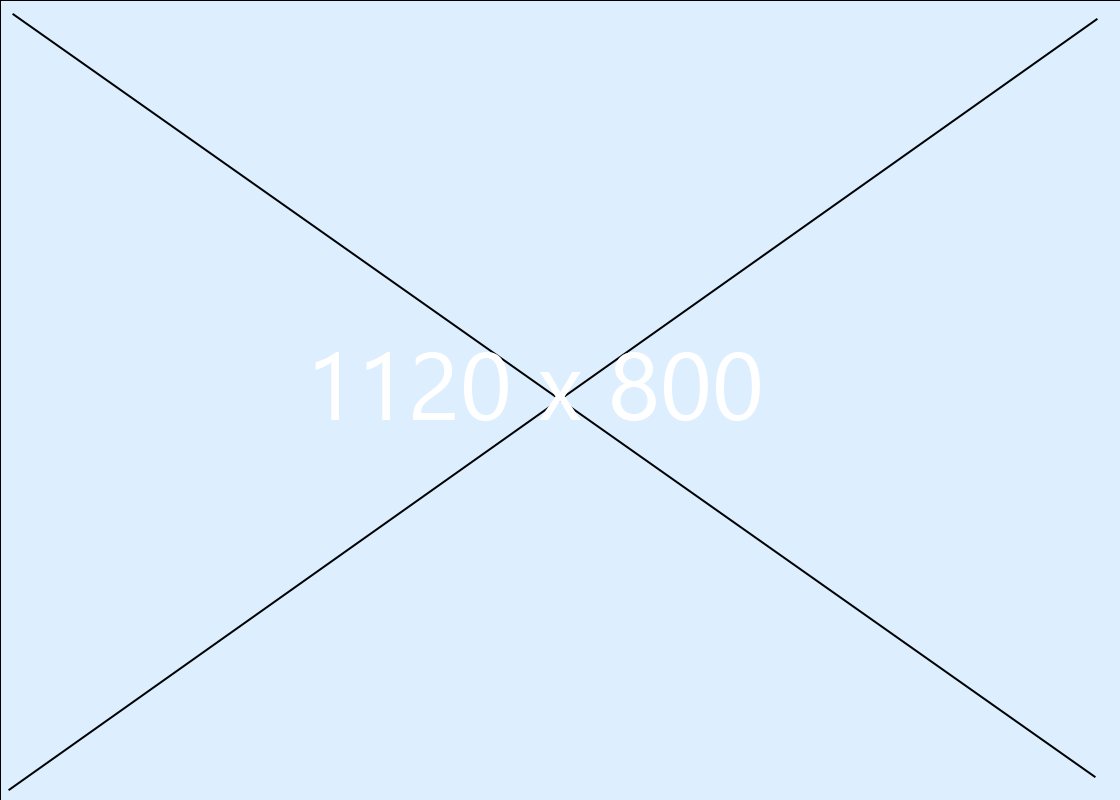
<style>
.page{position:relative;width:1120px;height:800px;background:#ddefff}
.page>*{position:absolute;margin:0}
.t1{font:96px "SegoeUI";color:#ffffff}
</style>
<div class="page">
<p class="t1" style="left:315px;top:352px;width:445px;height:69px">1120 x 800</p>
</div>
